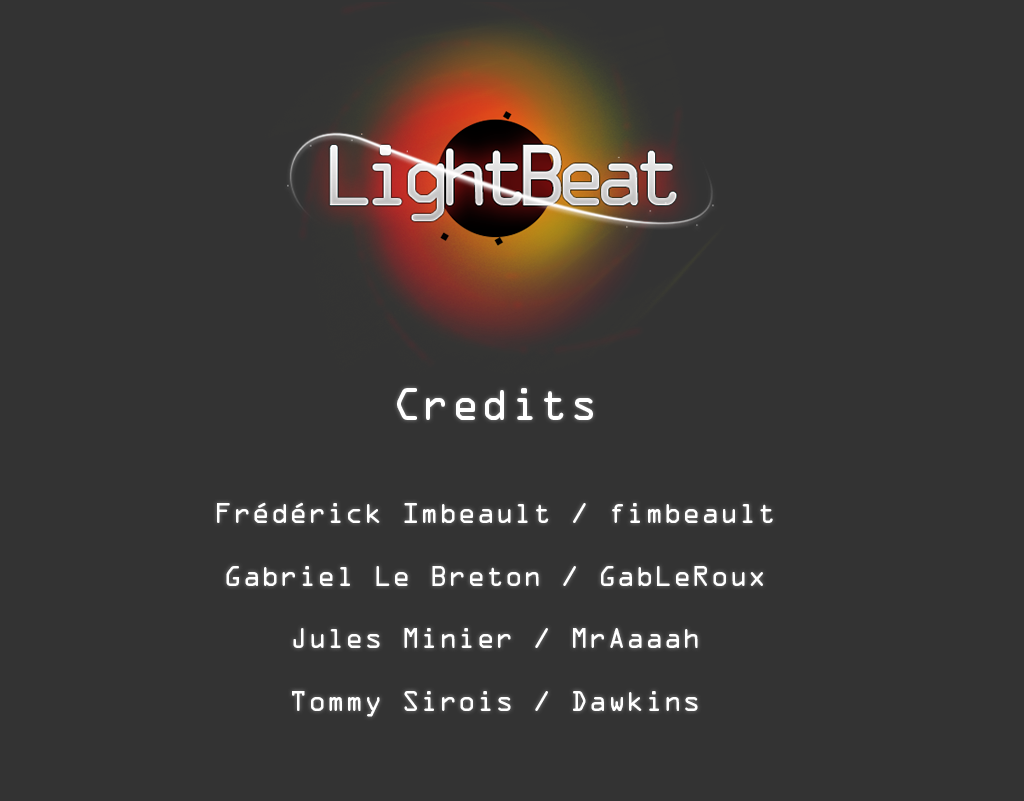
<style>
.page{position:relative;width:1024px;height:801px;background:#333333}
.page>*{position:absolute;margin:0}
.t1{font:26px "OCRAStd";color:#ffffff}
.t2{font:41px "OCRAStd";color:#ffffff}
</style>
<div class="page">
<p class="t1" style="left:217px;top:388px;width:556px;height:329px;text-align:center"><span class="t2">Credits<br><br><br></span>Frédérick Imbeault / fimbeault<br><br>Gabriel Le Breton / GabLeRoux<br><br>Jules Minier / MrAaaah<br><br>Tommy Sirois / Dawkins</p>
</div>
